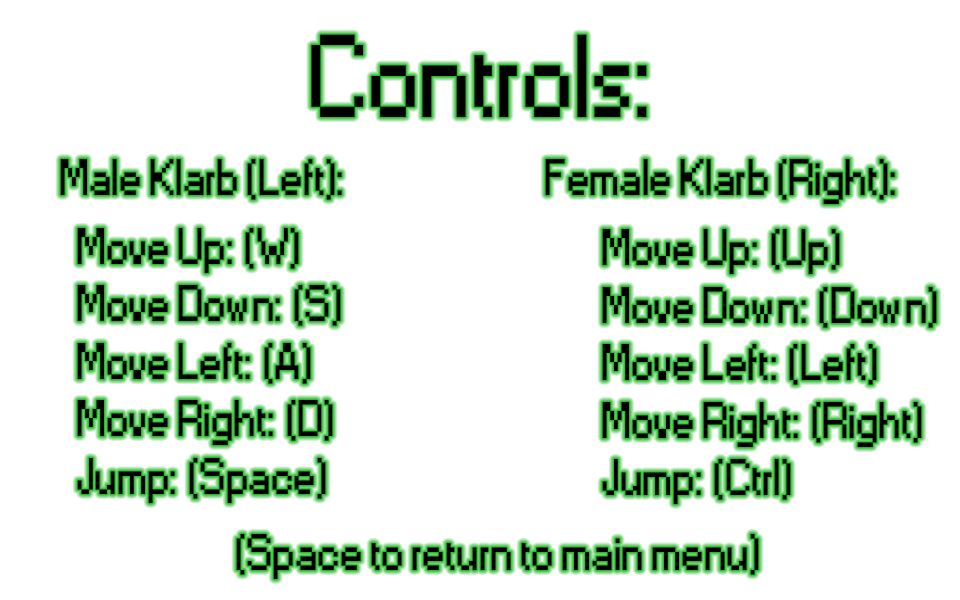
<style>
.page{position:relative;width:960px;height:600px;background:#ffffff}
.page>*{position:absolute;margin:0}
.t1{font:109.6px "Small Fonts";color:#000000}
.t2{font:48px "Small Fonts";color:#000000}
</style>
<div class="page">
<p class="t1" style="left:311px;top:34px;width:336px;height:83px">Controls:</p>
<p class="t2" style="left:60px;top:159px;width:282px;height:41px">Male Klarb (Left):</p>
<p class="t2" style="left:545px;top:159px;width:350px;height:45px">Female Klarb (Right):</p>
<p class="t2" style="left:77px;top:228px;width:264px;height:275px">Move Up: (W)<br>Move Down: (S)<br>Move Left: (A)<br>Move Right: (D)<br>Jump: (Space)</p>
<p class="t2" style="left:602px;top:229px;width:335px;height:275px">Move Up: (Up)<br>Move Down: (Down)<br>Move Left: (Left)<br>Move Right: (Right)<br>Jump: (Ctrl)</p>
<p class="t2" style="left:236px;top:534px;width:523px;height:45px">(Space to return to main menu)</p>
</div>
